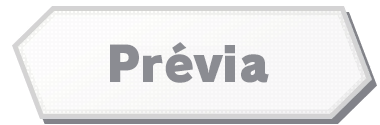
<style>
.page{position:relative;width:380px;height:125px}
.page>*{position:absolute;margin:0}
.t1{font:48px "RodinPro-UB";letter-spacing:-0.004em;color:#8b8c92}
</style>
<div class="page">
<p class="t1" style="left:110px;top:42px;width:159px;height:41px">Prévia</p>
</div>
